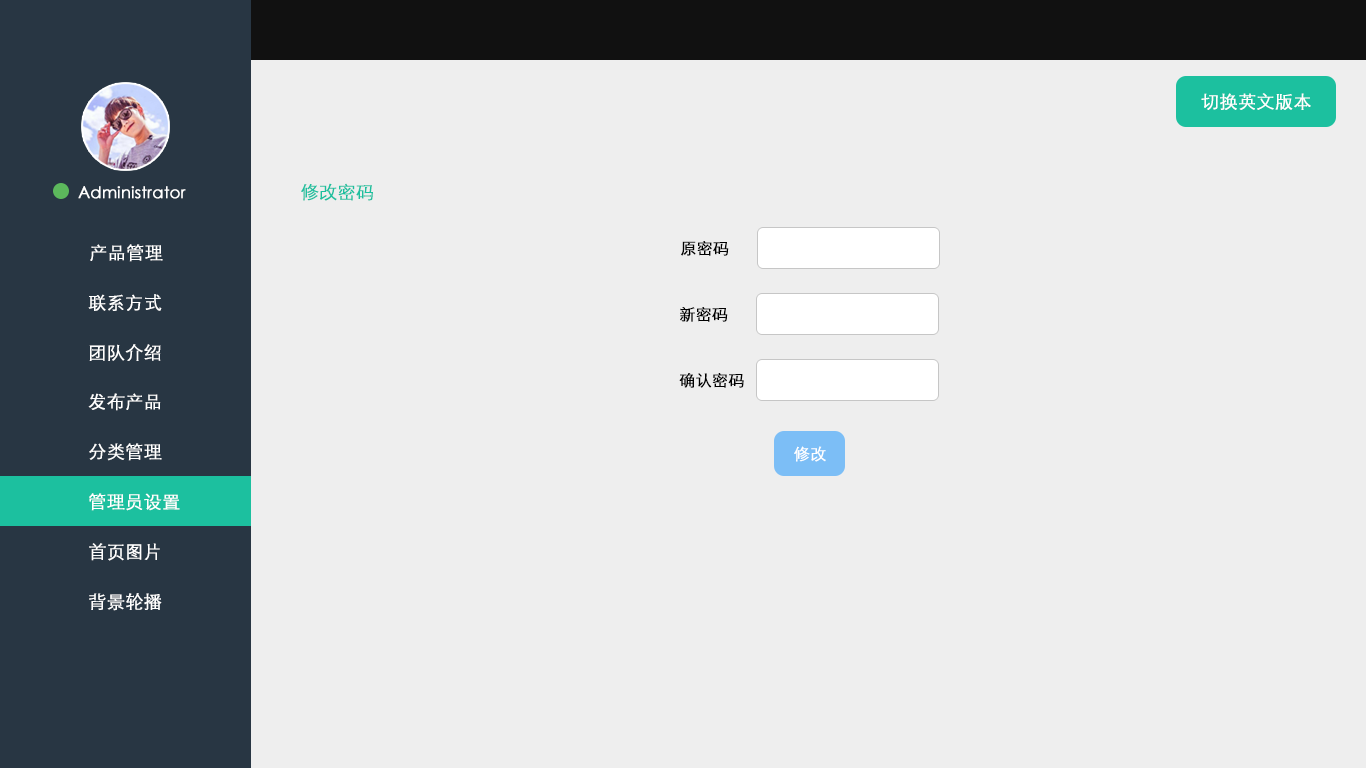
<style>
.page{position:relative;width:1366px;height:768px;background:#eeeeee}
.page>*{position:absolute;margin:0}
.t1{font:18px "STXihei";color:#ffffff;font-weight:bold}
.t2{font:18px "STXihei";color:#1cc09f;font-weight:bold}
.t3{font:16px "STXihei";color:#ffffff;font-weight:bold}
.t4{font:16px "STXihei";color:#000000;font-weight:bold}
</style>
<div class="page">
<p class="t1" style="left:1201px;top:93px;width:110px;height:17px">切换英文版本</p>
<p class="t2" style="left:301px;top:183px;width:72px;height:18px">修改密码</p>
<p class="t3" style="left:78px;top:186px;width:108px;height:13px">Administrator</p>
<p class="t1" style="left:90px;top:244px;width:73px;height:18px">产品管理</p>
<p class="t4" style="left:681px;top:241px;width:48px;height:15px">原密码</p>
<p class="t1" style="left:88px;top:294px;width:74px;height:17px">联系方式</p>
<p class="t4" style="left:680px;top:307px;width:48px;height:15px">新密码</p>
<p class="t1" style="left:89px;top:344px;width:72px;height:17px">团队介绍</p>
<p class="t4" style="left:679px;top:373px;width:65px;height:15px">确认密码</p>
<p class="t1" style="left:88px;top:393px;width:73px;height:18px">发布产品</p>
<p class="t1" style="left:89px;top:443px;width:73px;height:18px">分类管理</p>
<p class="t3" style="left:794px;top:446px;width:32px;height:16px">修改</p>
<p class="t1" style="left:89px;top:493px;width:91px;height:18px">管理员设置</p>
<p class="t1" style="left:89px;top:543px;width:71px;height:18px">首页图片</p>
<p class="t1" style="left:89px;top:593px;width:73px;height:18px">背景轮播</p>
</div>
